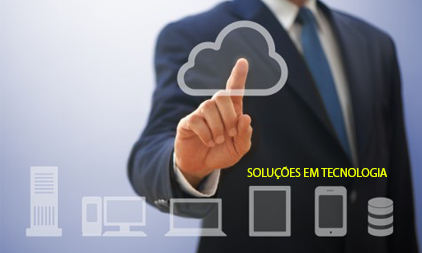
<style>
.page{position:relative;width:422px;height:253px}
.page>*{position:absolute;margin:0}
.t1{font:12px "MyriadPro-Regular";color:#eaff00}
</style>
<div class="page">
<p class="t1" style="left:247px;top:166px;width:140px;height:13px">SOLUÇÕES EM TECNOLOGIA</p>
</div>
